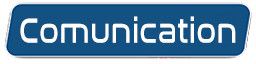
<style>
.page{position:relative;width:256px;height:64px;background:#135183}
.page>*{position:absolute;margin:0}
.t1{font:36px "NasalizationRg-Regular";color:#fefefe;scale:0.83 1}
</style>
<div class="page">
<p class="t1" style="left:20px;top:16px;width:216px;height:27px">Comunication</p>
</div>
